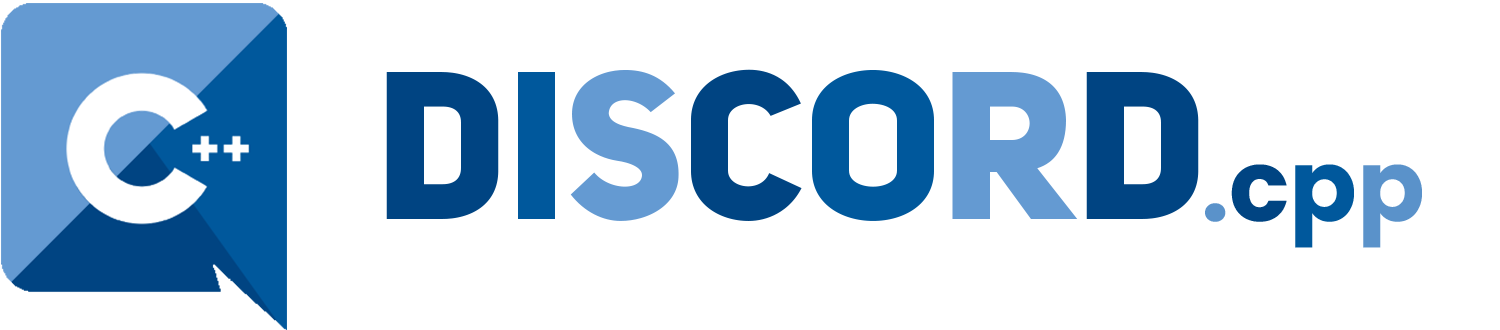
<style>
.page{position:relative;width:1500px;height:330px;background:#ffffff}
.page>*{position:absolute;margin:0}
.t1{font:207px "UniSansDemo-HeavyCAPS";color:#004482}
.t2{font:207px "UniSansDemo-HeavyCAPS";color:#00589c}
.t3{font:207px "UniSansDemo-HeavyCAPS";color:#649ad2}
.t4{font:100px "Poppins-Bold";color:#5a92ca}
.t5{font:100px "Poppins-Bold";color:#004482}
.t6{font:100px "Poppins-Bold";color:#00589c}
</style>
<div class="page">
<p class="t1" style="left:386px;top:69px;width:813px;height:152px">D<span class="t2">I</span><span class="t3">S</span>C<span class="t2">O</span><span class="t3">R</span>D</p>
<p class="t4" style="left:1205px;top:164px;width:217px;height:84px">.<span class="t5">c</span><span class="t6">p</span>p</p>
</div>
